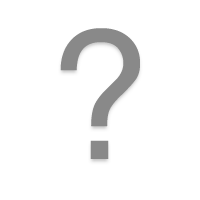
<style>
.page{position:relative;width:200px;height:200px;background:#ffffff}
.page>*{position:absolute;margin:0}
.t1{font:180px "Helvetica";color:#898989}
</style>
<div class="page">
<p class="t1" style="left:60px;top:28px;width:80px;height:131px">?</p>
</div>
